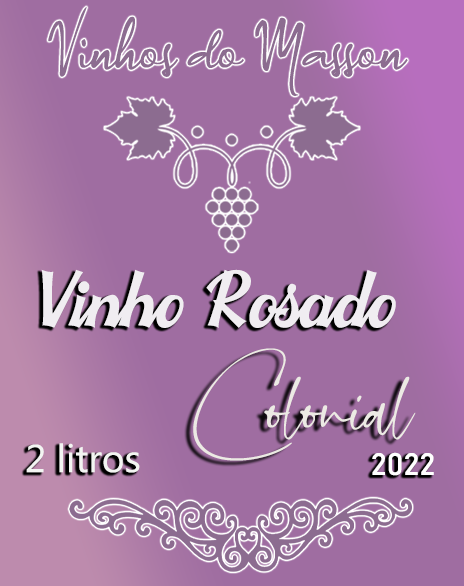
<style>
.page{position:relative;width:464px;height:586px;background:#9f6da1}
.page>*{position:absolute;margin:0}
.t1{font:97.3px "Casofa";color:#f0edf1}
.t2{font:104px "Dreaming-in-theMoonlight";color:#eceae4}
.t3{font:38.7px "MicrosoftPhagsPa";color:#f3f5f2}
.t4{font:30.7px "Bahnschrift";color:#ffffff}
</style>
<div class="page">
<p class="t1" style="left:41px;top:269px;width:355px;height:59px">Vinho Rosado</p>
<p class="t2" style="left:193px;top:348px;width:223px;height:113px">Colonial</p>
<p class="t3" style="left:26px;top:443px;width:114px;height:30px">2 litros</p>
<p class="t4" style="left:372px;top:452px;width:62px;height:24px">2022</p>
</div>
